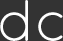
<style>
.page{position:relative;width:63px;height:41px;background:#333333}
.page>*{position:absolute;margin:0}
.t1{font:58.3px "Quicksand-Regular";color:#ffffff}
</style>
<div class="page">
<p class="t1" style="left:0px;top:0px;width:63px;height:41px">dc</p>
</div>
